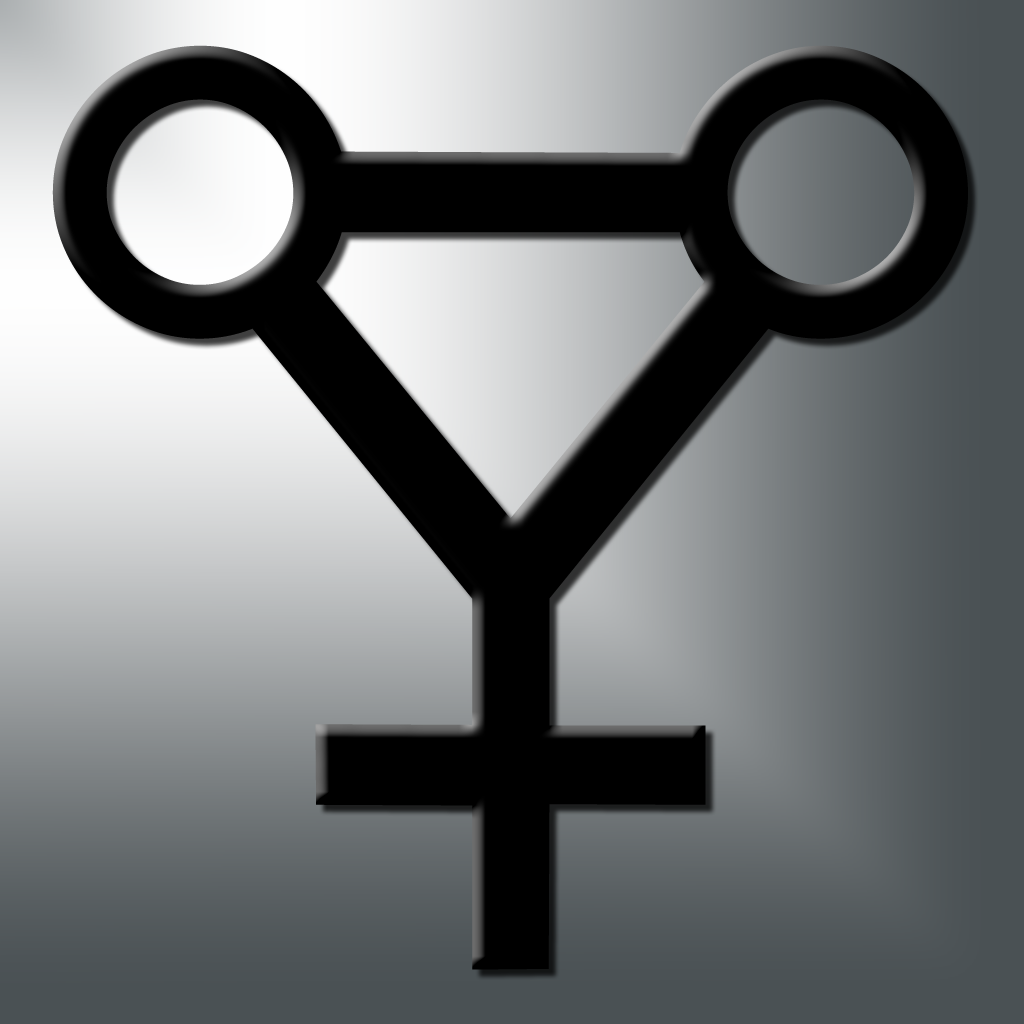
<style>
.page{position:relative;width:1024px;height:1024px}
.page>*{position:absolute;margin:0}
.t1{font:1371.7px "AppleSymbols";color:#000000}
</style>
<div class="page">
<p class="t1" style="left:52px;top:45px;width:916px;height:925px">🝖</p>
</div>
